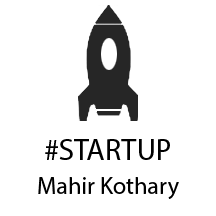
<style>
.page{position:relative;width:216px;height:216px;background:#ffffff}
.page>*{position:absolute;margin:0}
.t1{font:30px "MyriadPro-Regular";color:#000000}
.t2{font:24px "MyriadPro-Regular";color:#000000}
</style>
<div class="page">
<p class="t1" style="left:45px;top:139px;width:125px;height:21px">#STARTUP</p>
<p class="t2" style="left:38px;top:177px;width:141px;height:22px">Mahir Kothary</p>
</div>
